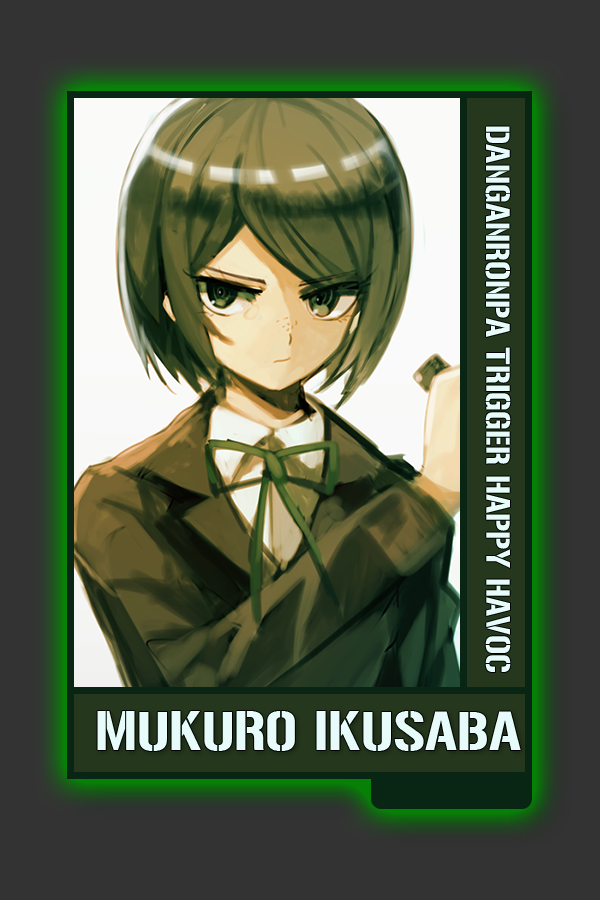
<style>
.page{position:relative;width:600px;height:900px;background:#333333}
.page>*{position:absolute;margin:0}
.t1{font:29.5px "Gunplay-Regular";color:#eefbfb}
.t2{font:49px "Gunplay-Regular";color:#eefbfb}
</style>
<div class="page">
<p class="t1" style="left:485px;top:126px;width:26px;height:546px;rotate:90deg">DANGANRONPA TRIGGER HAPPY HAVOC</p>
<p class="t2" style="left:97px;top:711px;width:424px;height:40px">MUKURO IKUSABA</p>
</div>
